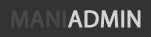
<style>
.page{position:relative;width:151px;height:37px;background:#333333}
.page>*{position:absolute;margin:0}
.t1{font:24px "MyriadPro-Regular";color:#d2d2cf;text-transform:uppercase;font-weight:bold}
.t2{font:24px "MyriadPro-Regular";color:#4a4a49;text-transform:uppercase;font-weight:bold}
</style>
<div class="page">
<p class="t1" style="left:11px;top:10px;width:130px;height:18px"><span class="t2">MANI</span>ADMIN</p>
</div>
